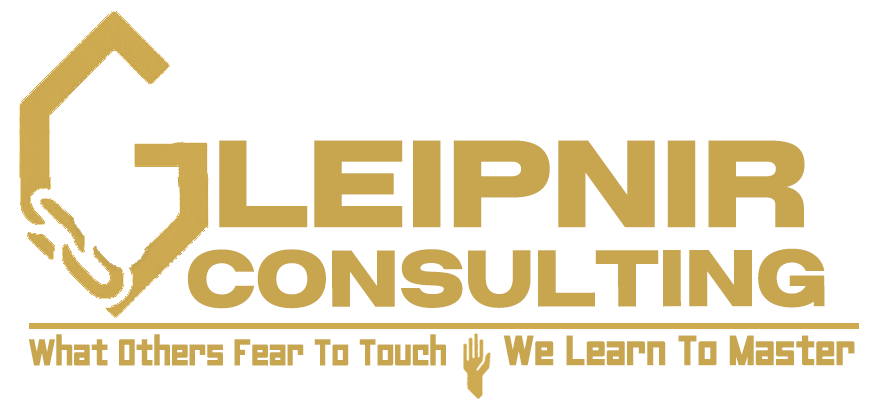
<style>
.page{position:relative;width:872px;height:419px;background:#ffffff}
.page>*{position:absolute;margin:0}
.t1{font:123.6px "GreaterTheoryRegular";letter-spacing:-0.01em;color:#c7a64f}
.t2{font:80px "GreaterTheoryRegular";letter-spacing:-0.01em;color:#c7a64f}
.t3{font:42px "AngleSquareDEMO";letter-spacing:-0.01em;color:#c7a64f}
.t4{font:48px "AngleSquareDEMO";letter-spacing:-0.01em;color:#c7a64f}
</style>
<div class="page">
<p class="t1" style="left:219px;top:140px;width:586px;height:88px">Leipnir</p>
<p class="t2" style="left:187px;top:248px;width:638px;height:61px">Consulting</p>
<p class="t3" style="left:28px;top:334px;width:418px;height:32px">What Others Fear To Touch</p>
<p class="t4" style="left:503px;top:335px;width:352px;height:31px">We Learn To Master</p>
</div>
